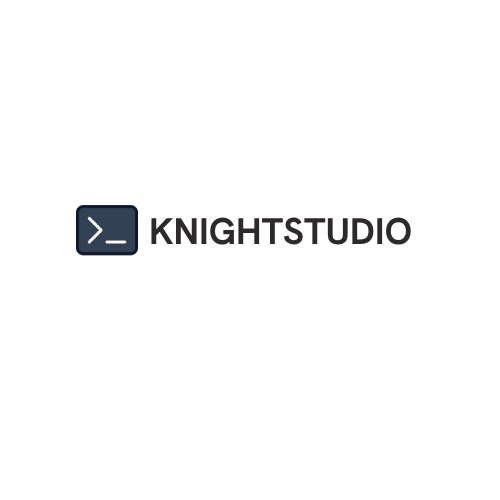
<style>
.page{position:relative;width:500px;height:500px;background:#ffffff}
.page>*{position:absolute;margin:0}
.t1{font:37px "HankenGrotesk-Bold";color:#2f2a2a}
</style>
<div class="page">
<p class="t1" style="left:151px;top:217px;width:260px;height:28px">KNIGHTSTUDIO</p>
</div>
